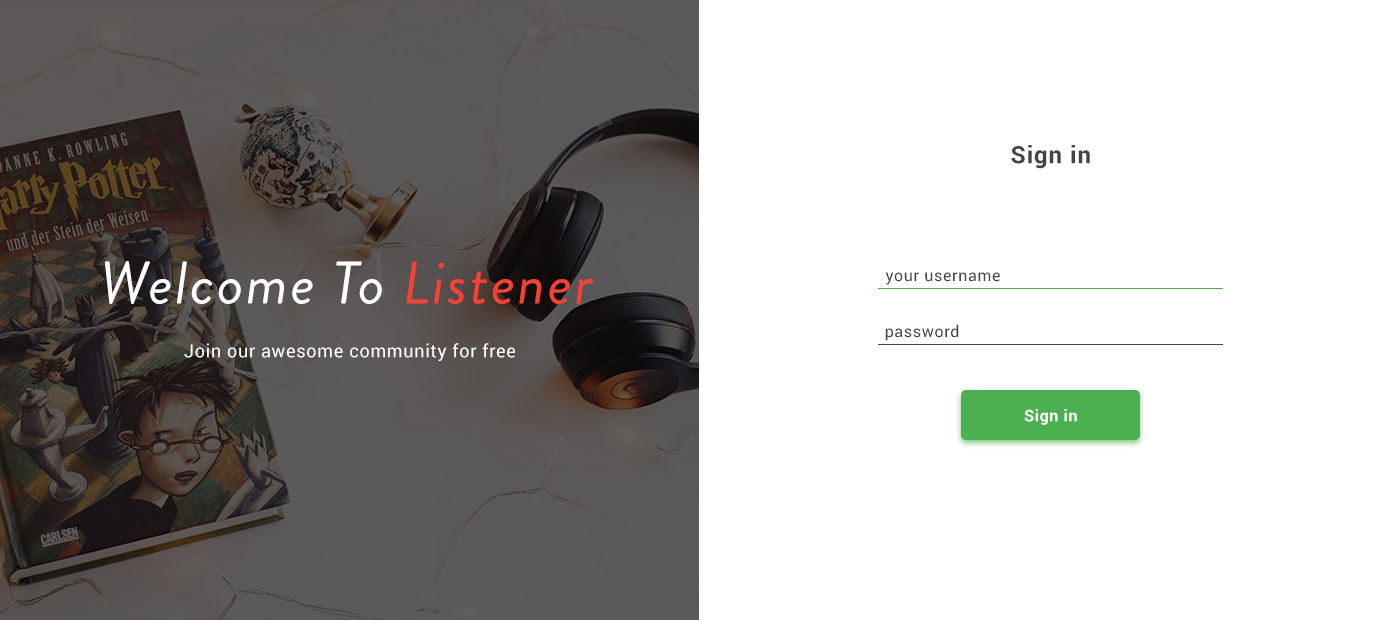
<style>
.page{position:relative;width:1400px;height:620px;background:#ffffff}
.page>*{position:absolute;margin:0}
.t1{font:24px "Roboto-Bold";letter-spacing:0.04em;color:#444444}
.t2{font:60px "BrandonGrotesque-RegularItalic";letter-spacing:0.04em;color:#ffffff}
.t3{font:60px "BrandonGrotesque-RegularItalic";letter-spacing:0.04em;color:#f44336}
.t4{font:16px "Roboto-Regular";letter-spacing:0.04em;color:#444444}
.t5{font:18px "Roboto-Regular";letter-spacing:0.04em;color:#ffffff}
.t6{font:16px "Roboto-Bold";letter-spacing:0.04em;color:#ffffff}
</style>
<div class="page">
<p class="t1" style="left:1011px;top:145px;width:79px;height:24px">Sign in</p>
<p class="t2" style="left:105px;top:261px;width:489px;height:43px">Welcome To <span class="t3">Listener</span></p>
<p class="t4" style="left:885px;top:272px;width:115px;height:13px">your username</p>
<p class="t4" style="left:885px;top:324px;width:74px;height:17px">password</p>
<p class="t5" style="left:184px;top:343px;width:331px;height:18px">Join our awesome community for free</p>
<p class="t6" style="left:1024px;top:409px;width:53px;height:16px">Sign in</p>
</div>
